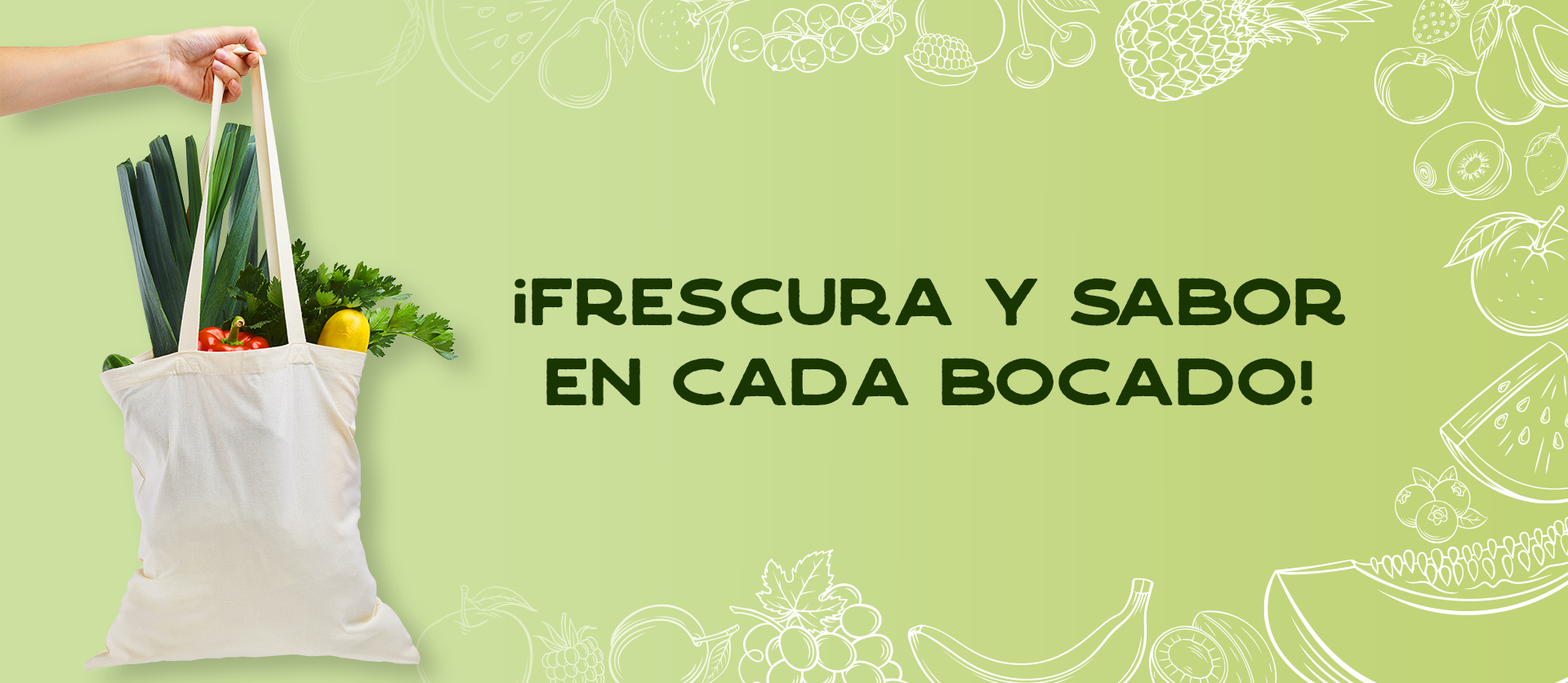
<style>
.page{position:relative;width:1568px;height:683px}
.page>*{position:absolute;margin:0}
.t1{font:67px "Crafter-Rough";color:#193500}
</style>
<div class="page">
<p class="t1" style="left:514px;top:278px;width:832px;height:128px;text-align:center">¡Frescura y Sabor en Cada Bocado!</p>
</div>
